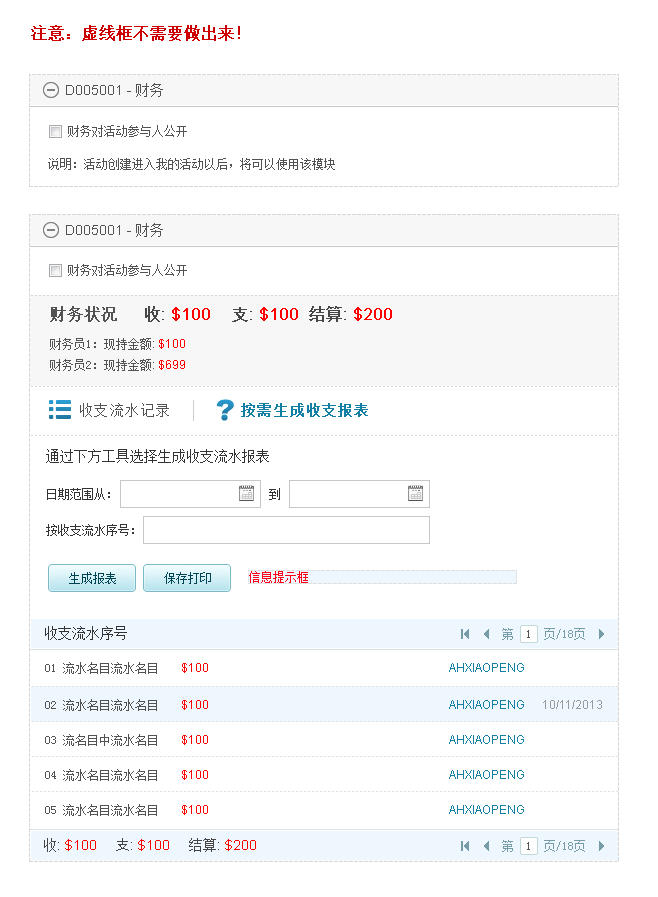
<style>
.page{position:relative;width:658px;height:897px;background:#ffffff}
.page>*{position:absolute;margin:0}
.t1{font:16px "SimSun";color:#cc0000;font-weight:bold}
.t2{font:14px "ArialMT";color:#525252}
.t3{font:14px "SimSun";color:#525252}
.t4{font:12px "SimSun";color:#525252}
.t5{font:16px "SimSun";color:#525252;font-weight:bold}
.t6{font:16px "ArialMT";color:#ff0000;font-weight:bold}
.t7{font:16px "SimSun";color:#464646;font-weight:bold}
.t8{font:16px "ArialMT";color:#464646;font-weight:bold}
.t9{font:16px "STHeitiSC-Light";color:#464646;font-weight:bold}
.t10{font:12px/21px "SimSun";color:#525252}
.t11{font:12px/21px "ArialMT";color:#464646}
.t12{font:12px/21px "ArialMT";color:#ff0000}
.t13{font:14.8px "SimSun";letter-spacing:0.05em;color:#525252}
.t14{font:14.8px "SimSun";letter-spacing:0.05em;color:#147fa5;font-weight:bold}
.t15{font:14px "SimSun";color:#333333}
.t16{font:12px "ArialMT";color:#ff0000}
.t17{font:12px "ArialMT";color:#137fa5}
.t18{font:12px "ArialMT";color:#999999}
.t19{font:14px "ArialMT";color:#ff0000}
.t20{font:14px "SimSun";color:#464646}
.t21{font:14px "ArialMT";color:#464646}
.t22{font:14px "STHeitiSC-Light";color:#464646}
</style>
<div class="page">
<p class="t1" style="left:31px;top:25px;width:209px;height:16px">注意：虚线框不需要做出来！</p>
<p class="t2" style="left:66px;top:83px;width:97px;height:14px">D005001 - <span class="t3">财务</span></p>
<p class="t4" style="left:68px;top:125px;width:119px;height:12px">财务对活动参与人公开</p>
<p class="t4" style="left:48px;top:158px;width:287px;height:12px">说明：活动创建进入我的活动以后，将可以使用该模块</p>
<p class="t2" style="left:66px;top:223px;width:97px;height:14px">D005001 - <span class="t3">财务</span></p>
<p class="t4" style="left:68px;top:264px;width:119px;height:12px">财务对活动参与人公开</p>
<p class="t5" style="left:50px;top:306px;width:67px;height:16px">财务状况</p>
<p class="t6" style="left:145px;top:306px;width:65px;height:16px"><span class="t7">收</span><span class="t8">: </span>$100</p>
<p class="t6" style="left:232px;top:307px;width:66px;height:15px"><span class="t9">支</span><span class="t8">: </span>$100</p>
<p class="t6" style="left:309px;top:306px;width:83px;height:16px"><span class="t7">结算</span><span class="t8">: </span>$200</p>
<p class="t10" style="left:50px;top:338px;width:135px;height:33px">财务员1：现持金额<span class="t11">: </span><span class="t12">$100 <br></span>财务员2：现持金额<span class="t11">: </span><span class="t12">$699</span></p>
<p class="t13" style="left:80px;top:403px;width:89px;height:14px">收支流水记录</p>
<p class="t14" style="left:241px;top:403px;width:127px;height:14px">按需生成收支报表</p>
<p class="t15" style="left:46px;top:449px;width:223px;height:14px">通过下方工具选择生成收支流水报表</p>
<p class="t15" style="left:45px;top:626px;width:82px;height:14px">收支流水序号</p>
<p class="t4" style="left:45px;top:662px;width:112px;height:12px">01 流水名目流水名目</p>
<p class="t16" style="left:182px;top:663px;width:26px;height:10px">$100</p>
<p class="t17" style="left:449px;top:663px;width:75px;height:9px">AHXIAOPENG</p>
<p class="t4" style="left:45px;top:699px;width:112px;height:12px">02 流水名目流水名目</p>
<p class="t16" style="left:182px;top:700px;width:26px;height:10px">$100</p>
<p class="t17" style="left:449px;top:700px;width:75px;height:9px">AHXIAOPENG</p>
<p class="t18" style="left:543px;top:700px;width:59px;height:9px">10/11/2013</p>
<p class="t4" style="left:45px;top:734px;width:112px;height:12px">03 流名目中流水名目</p>
<p class="t16" style="left:182px;top:735px;width:26px;height:10px">$100</p>
<p class="t17" style="left:449px;top:735px;width:75px;height:9px">AHXIAOPENG</p>
<p class="t4" style="left:45px;top:769px;width:112px;height:12px">04 流水名目流水名目</p>
<p class="t16" style="left:182px;top:770px;width:26px;height:10px">$100</p>
<p class="t17" style="left:449px;top:770px;width:75px;height:9px">AHXIAOPENG</p>
<p class="t4" style="left:45px;top:804px;width:112px;height:12px">05 流水名目流水名目</p>
<p class="t16" style="left:182px;top:805px;width:26px;height:10px">$100</p>
<p class="t17" style="left:449px;top:805px;width:75px;height:9px">AHXIAOPENG</p>
<p class="t19" style="left:44px;top:838px;width:52px;height:14px"><span class="t20">收</span><span class="t21">: </span>$100</p>
<p class="t19" style="left:116px;top:838px;width:53px;height:13px"><span class="t22">支</span><span class="t21">: </span>$100</p>
<p class="t19" style="left:189px;top:838px;width:67px;height:14px"><span class="t20">结算</span><span class="t21">: </span>$200</p>
</div>
